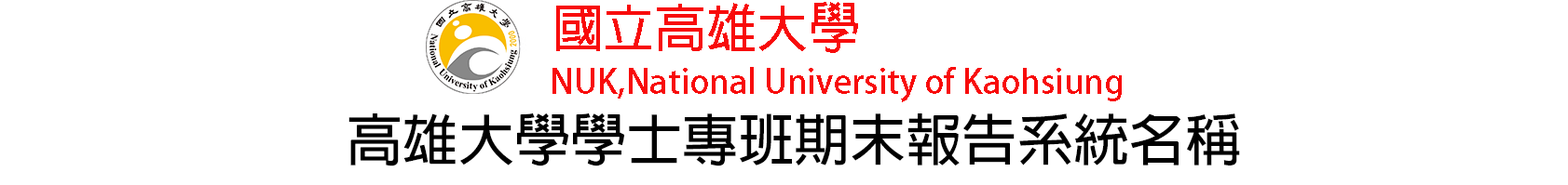
<style>
.page{position:relative;width:1568px;height:185px;background:#ffffff}
.page>*{position:absolute;margin:0}
.t1{font:51.2px "AdobeFanHeitiStd-Bold";color:#f80b0b}
.t2{font:33.5px "AdobeFanHeitiStd-Bold";color:#f80b0b}
.t3{font:55.9px "AdobeFanHeitiStd-Bold";color:#000000}
</style>
<div class="page">
<p class="t1" style="left:556px;top:2px;width:302px;height:51px">國立高雄大學</p>
<p class="t2" style="left:552px;top:67px;width:570px;height:35px">NUK,National University of Kaohsiung</p>
<p class="t3" style="left:348px;top:114px;width:892px;height:53px">高雄大學學士專班期末報告系統名稱</p>
</div>
